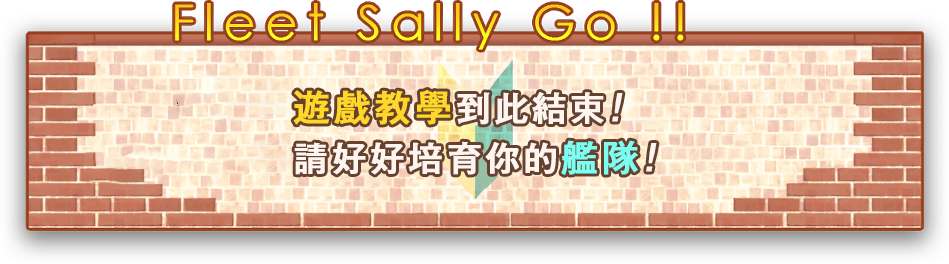
<style>
.page{position:relative;width:949px;height:264px}
.page>*{position:absolute;margin:0}
.t1{font:34px/50px "GothicMB101Pr6N-Medium";letter-spacing:0.1em;color:#fef5f1;font-weight:bold}
.t2{font:36px/50px "GothicMB101Pr6N-Medium";letter-spacing:0.1em;color:#ffd728;font-weight:bold}
.t3{font:34px/50px "GothicMB101Pr6N-Medium";letter-spacing:0.1em;color:#fef5f1;font-weight:bold;font-style:italic}
.t4{font:36px/50px "GothicMB101Pr6N-Medium";letter-spacing:0.1em;color:#7cfff0;font-weight:bold}
</style>
<div class="page">
<p class="t1" style="left:293px;top:90px;width:364px;height:85px"><span class="t2">遊戲教學</span>到此結束<span class="t3">!<br></span>請好好培育你的<span class="t4">艦隊</span><span class="t3">!</span></p>
</div>
